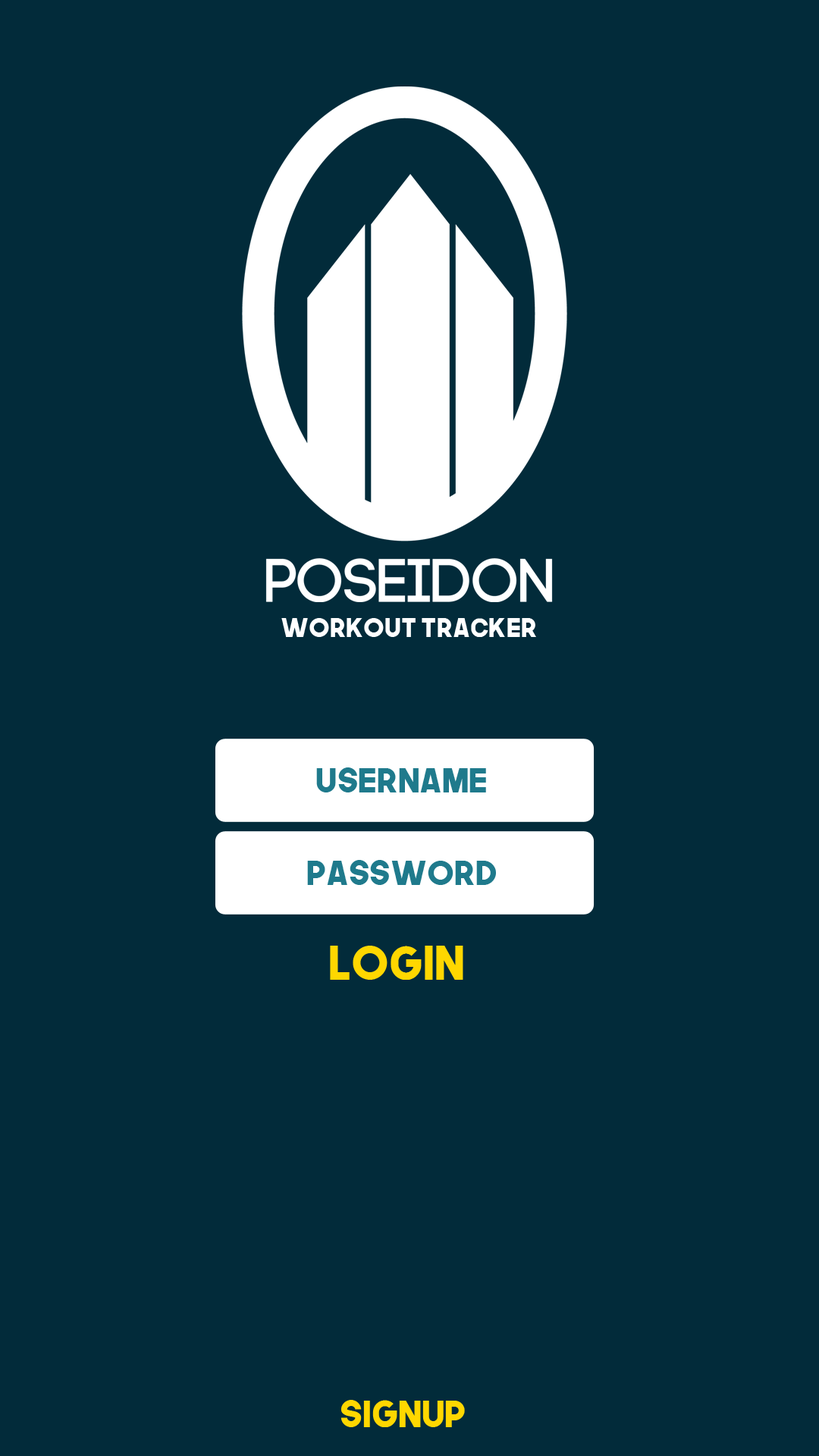
<style>
.page{position:relative;width:819px;height:1456px;background:#022b3a}
.page>*{position:absolute;margin:0}
.t1{font:25.8px "TheNextFont";color:#ffffff}
.t2{font:33.5px "TheNextFont";color:#1f7a8c}
.t3{font:46.4px "TheNextFont";color:#ffd700}
.t4{font:36.2px "TheNextFont";color:#ffd700}
</style>
<div class="page">
<p class="t1" style="left:281px;top:618px;width:255px;height:19px">Workout Tracker</p>
<p class="t2" style="left:316px;top:767px;width:170px;height:25px">Username</p>
<p class="t2" style="left:307px;top:860px;width:189px;height:25px">Password</p>
<p class="t3" style="left:330px;top:946px;width:133px;height:34px">Login</p>
<p class="t4" style="left:340px;top:1400px;width:125px;height:27px">Signup</p>
</div>
